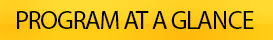
<style>
.page{position:relative;width:273px;height:40px}
.page>*{position:absolute;margin:0}
.t1{font:25.9px "MyriadPro-Regular";letter-spacing:-0.048em;color:#000000}
</style>
<div class="page">
<p class="t1" style="left:17px;top:11px;width:237px;height:18px">PROGRAM AT A GLANCE</p>
</div>
